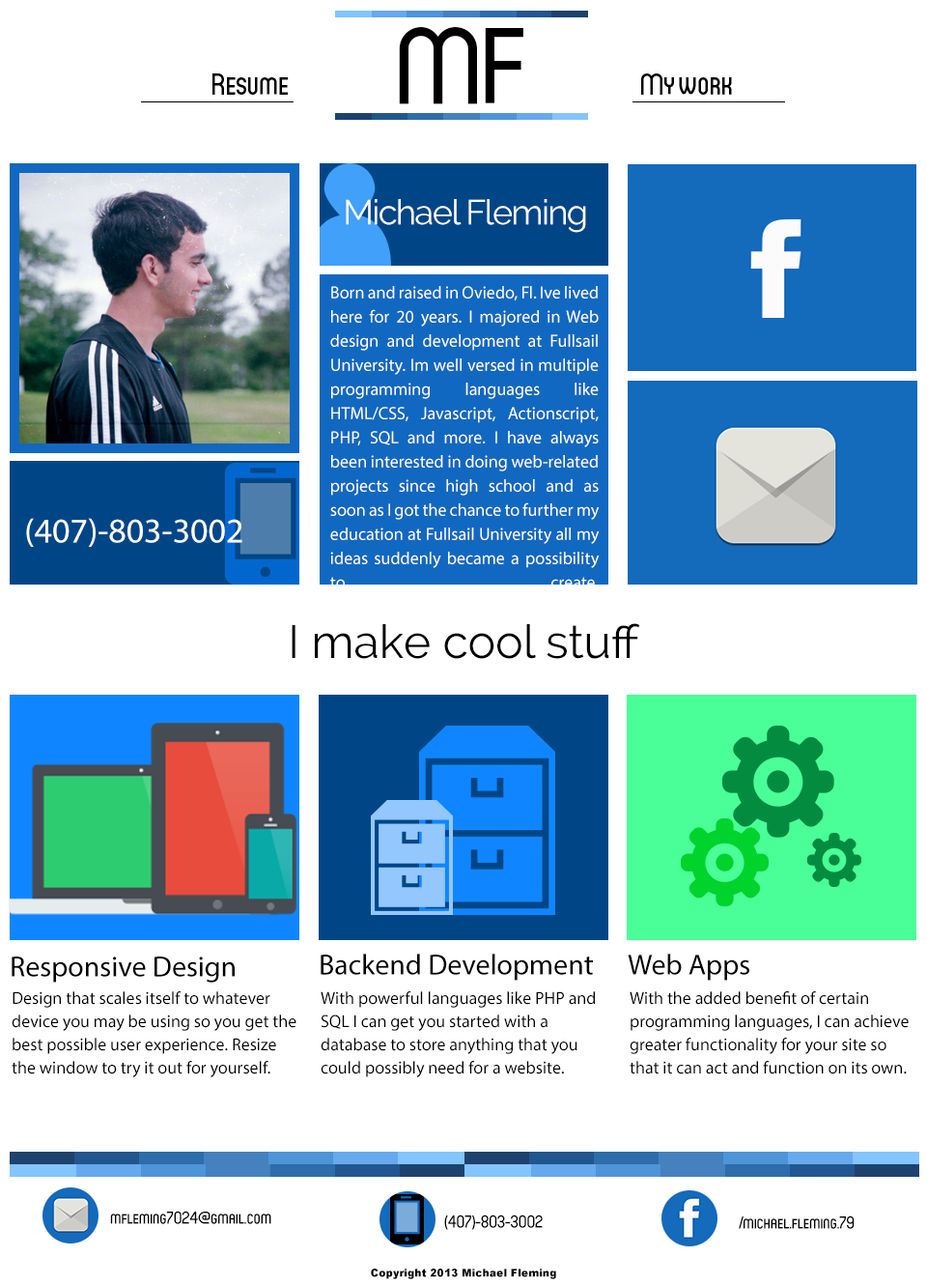
<style>
.page{position:relative;width:927px;height:1286px;background:#ffffff}
.page>*{position:absolute;margin:0}
.t1{font:108.2px "Circula-Medium";color:#000000}
.t2{font:34.8px "Raleway-Regular";letter-spacing:-0.04em;color:#fefefe}
.t3{font:17.4px/24.2px "MyriadPro-Regular";color:#fefefe}
.t4{font:34.8px "MyriadPro-Regular";color:#fefefe}
.t5{font:46.4px "Raleway-Regular";color:#000000}
.t6{font:29px "MyriadPro-Regular";color:#000000}
.t7{font:17.4px/23.2px "MyriadPro-Regular";color:#000000}
.t8{font:17.4px "Circula-Medium";color:#000000}
.t9{font:10.6px "Arial-Black";color:#000000}
</style>
<div class="page">
<p class="t1" style="left:399px;top:27px;width:125px;height:77px">MF</p>
<p class="t2" style="left:346px;top:199px;width:240px;height:34px">Michael Fleming</p>
<p class="t3" style="left:330px;top:286px;width:270px;height:302px;text-align:justify">Born and raised in Oviedo, Fl. Ive lived here for 20 years. I majored in Web design and development at Fullsail University. Im well versed in multiple programming languages like HTML/CSS, Javascript, Actionscript, PHP, SQL and more. I have always been interested in doing web-related projects since high school and as soon as I got the chance to further my education at Fullsail University all my ideas suddenly became a possibility to create.</p>
<p class="t4" style="left:26px;top:518px;width:216px;height:29px">(407)-803-3002</p>
<p class="t5" style="left:292px;top:623px;width:348px;height:36px">I make cool stuff</p>
<p class="t6" style="left:321px;top:953px;width:272px;height:28px">Backend Development</p>
<p class="t6" style="left:628px;top:953px;width:122px;height:28px">Web Apps</p>
<p class="t6" style="left:12px;top:956px;width:223px;height:26px">Responsive Design</p>
<p class="t7" style="left:12px;top:991px;width:285px;height:86px">Design that scales itself to whatever device you may be using so you get the best possible user experience. Resize the window to try it out for yourself.</p>
<p class="t7" style="left:321px;top:991px;width:274px;height:86px">With powerful languages like PHP and SQL I can get you started with a database to store anything that you could possibly need for a website.</p>
<p class="t7" style="left:630px;top:991px;width:279px;height:83px">With the added benefit of certain programming languages, I can achieve greater functionality for your site so that it can act and function on its own.</p>
<p class="t8" style="left:110px;top:1210px;width:161px;height:14px">mfleming7024@gmail.com</p>
<p class="t8" style="left:444px;top:1214px;width:99px;height:16px">(407)-803-3002</p>
<p class="t8" style="left:739px;top:1215px;width:116px;height:14px">/michael.fleming.79</p>
<p class="t9" style="left:371px;top:1268px;width:185px;height:11px">Copyright 2013 Michael Fleming</p>
</div>
